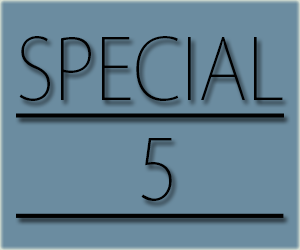
<style>
.page{position:relative;width:300px;height:250px;background:#6b8ca0}
.page>*{position:absolute;margin:0}
.t1{font:83.6px "KozGoPro-ExtraLight";color:#000000;text-decoration:underline;scale:0.9 1}
</style>
<div class="page">
<p class="t1" style="left:16px;top:36px;width:268px;height:182px">SPECIAL<br>       5</p>
</div>
